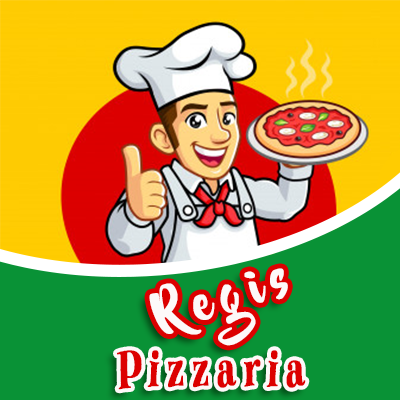
<style>
.page{position:relative;width:400px;height:400px;background:#099236}
.page>*{position:absolute;margin:0}
.t1{font:46.7px "BeyondTheMountains";letter-spacing:0.2em;color:#fdf9f9;font-weight:bold}
.t2{font:48.9px "Gavabon";letter-spacing:0.2em;color:#dc0000;font-weight:bold;scale:0.7 1}
</style>
<div class="page">
<p class="t1" style="left:149px;top:268px;width:139px;height:78px;rotate:-18deg">Regis</p>
<p class="t2" style="left:117px;top:350px;width:189px;height:40px">Pizzaria</p>
</div>
